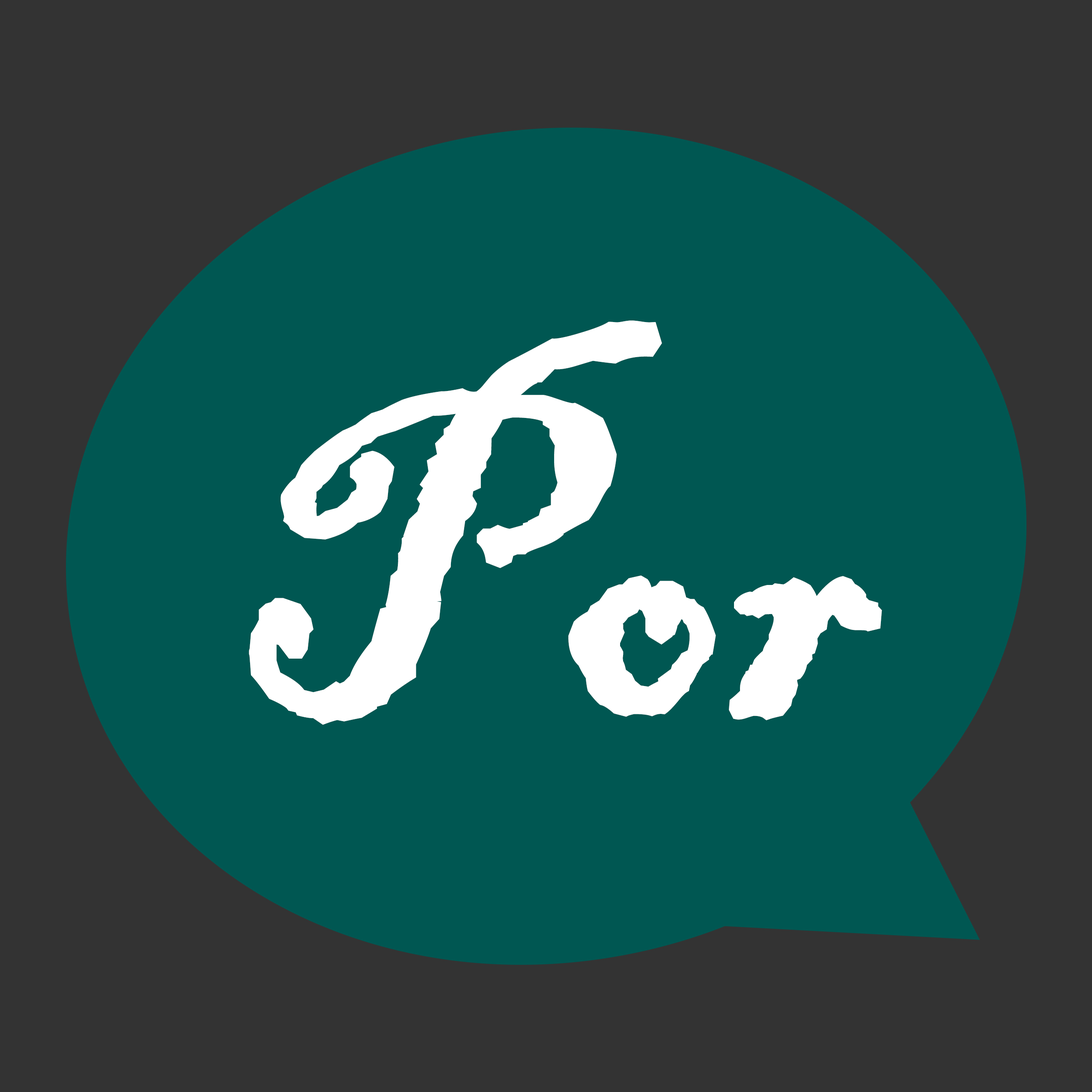
<style>
.page{position:relative;width:1092px;height:1092px;background:#005752}
.page>*{position:absolute;margin:0}
.t1{font:463.3px "BlackadderITC-Regular";color:#ffffff;font-weight:bold}
</style>
<div class="page">
<p class="t1" style="left:249px;top:320px;width:633px;height:405px">Por</p>
</div>
